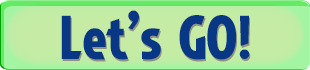
<style>
.page{position:relative;width:310px;height:70px}
.page>*{position:absolute;margin:0}
.t1{font:65px "ImpactaLL";color:#083785}
</style>
<div class="page">
<p class="t1" style="left:61px;top:10px;width:189px;height:50px">Let’s GO!</p>
</div>
